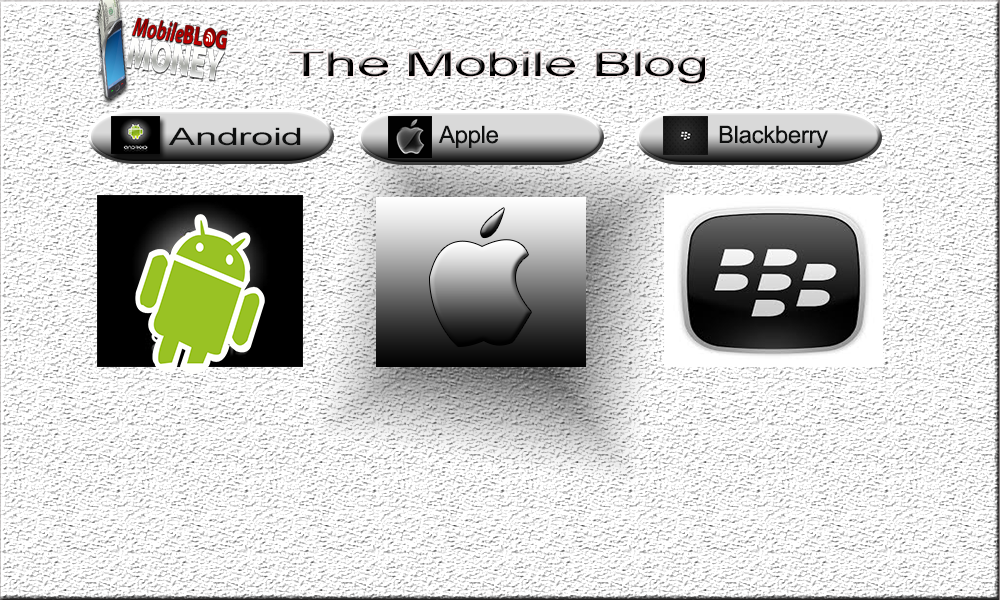
<style>
.page{position:relative;width:1000px;height:600px;background:#ffffff}
.page>*{position:absolute;margin:0}
.t1{font:36px "ArialMT";letter-spacing:-0.015em;scale:1.67 1}
.t2{font:24px "ArialMT";letter-spacing:-0.015em;color:#0e0f0f}
.t3{font:24px "ArialMT";letter-spacing:-0.015em;color:#0e0f0f;scale:1.67 1}
</style>
<div class="page">
<p class="t1" style="left:289px;top:50px;width:416px;height:34px">The Mobile Blog</p>
<p class="t2" style="left:438px;top:125px;width:60px;height:23px">Apple</p>
<p class="t2" style="left:719px;top:125px;width:109px;height:24px">Blackberry</p>
<p class="t3" style="left:168px;top:127px;width:133px;height:19px">Android</p>
</div>
